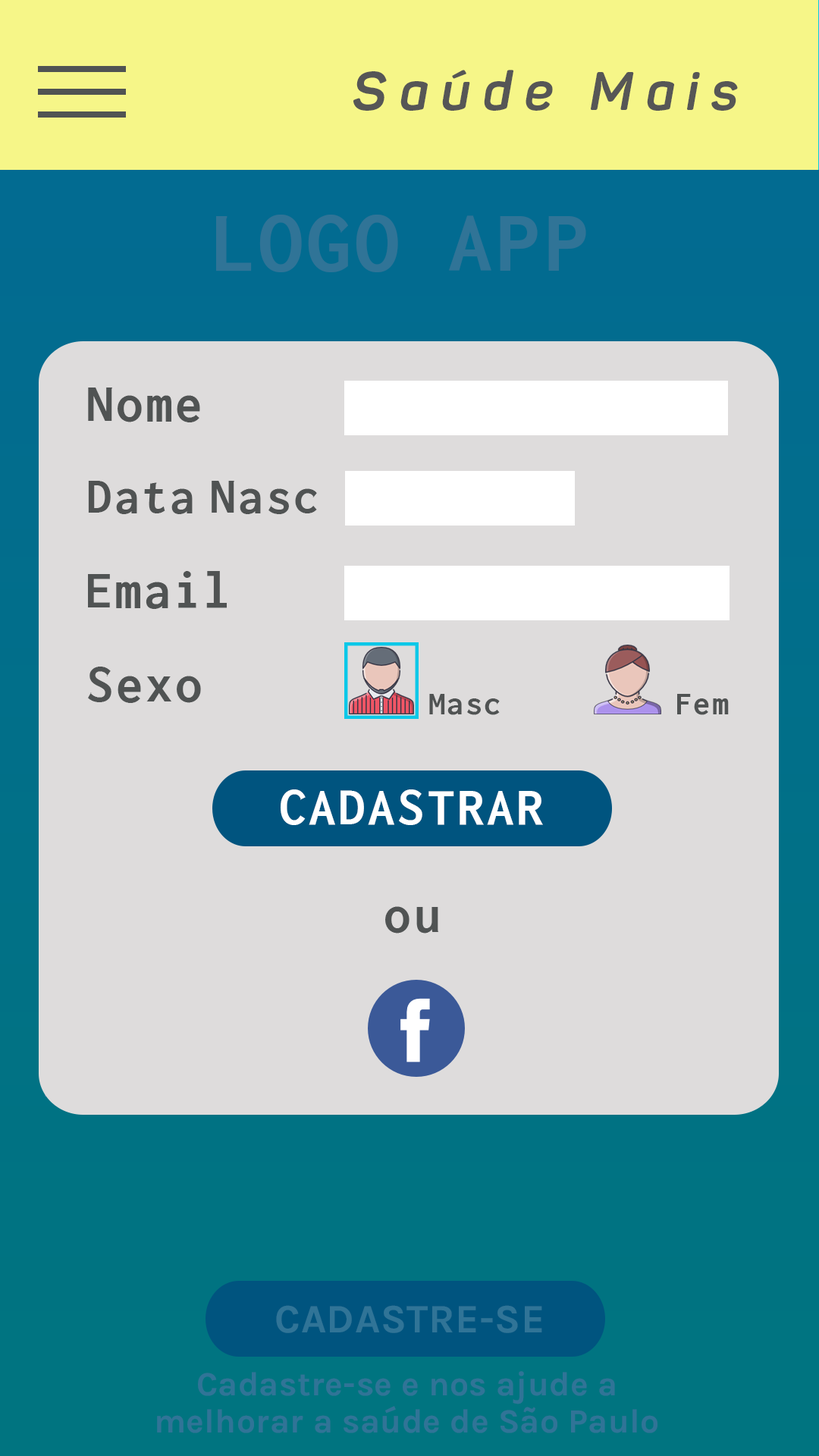
<style>
.page{position:relative;width:819px;height:1456px;background:#dedcdc}
.page>*{position:absolute;margin:0}
.t1{font:53.9px "Panton-BoldItalic";letter-spacing:0.23em;color:#565656}
.t2{font:87.6px "Inconsolata-Bold";letter-spacing:0.05em;color:#307497}
.t3{font:53.9px "Inconsolata-Bold";letter-spacing:0.05em;color:#505353}
.t4{font:50.6px "Inconsolata-Bold";letter-spacing:0.05em;color:#505353}
.t5{font:33.7px "Inconsolata-Bold";letter-spacing:0.05em;color:#505353}
.t6{font:53.9px "Inconsolata-Bold";letter-spacing:0.05em;color:#ffffff}
.t7{font:40.4px "Karla-Bold";letter-spacing:0.01em;color:#307497}
.t8{font:33.7px/37.1px "Karla-Bold";letter-spacing:0.01em;color:#307497}
</style>
<div class="page">
<p class="t1" style="left:353px;top:70px;width:385px;height:41px">Saúde Mais</p>
<p class="t2" style="left:216px;top:215px;width:370px;height:57px">LOGO APP</p>
<p class="t3" style="left:88px;top:388px;width:112px;height:34px">Nome</p>
<p class="t4" style="left:88px;top:481px;width:229px;height:33px">Data Nasc</p>
<p class="t3" style="left:88px;top:571px;width:139px;height:38px">Email</p>
<p class="t3" style="left:88px;top:667px;width:113px;height:36px">Sexo</p>
<p class="t5" style="left:429px;top:694px;width:71px;height:21px">Masc</p>
<p class="t5" style="left:677px;top:694px;width:52px;height:21px">Fem</p>
<p class="t6" style="left:281px;top:789px;width:262px;height:36px">CADASTRAR</p>
<p class="t3" style="left:385px;top:906px;width:54px;height:27px">ou</p>
<p class="t7" style="left:276px;top:1305px;width:266px;height:28px">CADASTRE-SE</p>
<p class="t8" style="left:157px;top:1371px;width:500px;height:62px;text-align:center">Cadastre-se e nos ajude a<br>melhorar a saúde de São Paulo</p>
</div>
